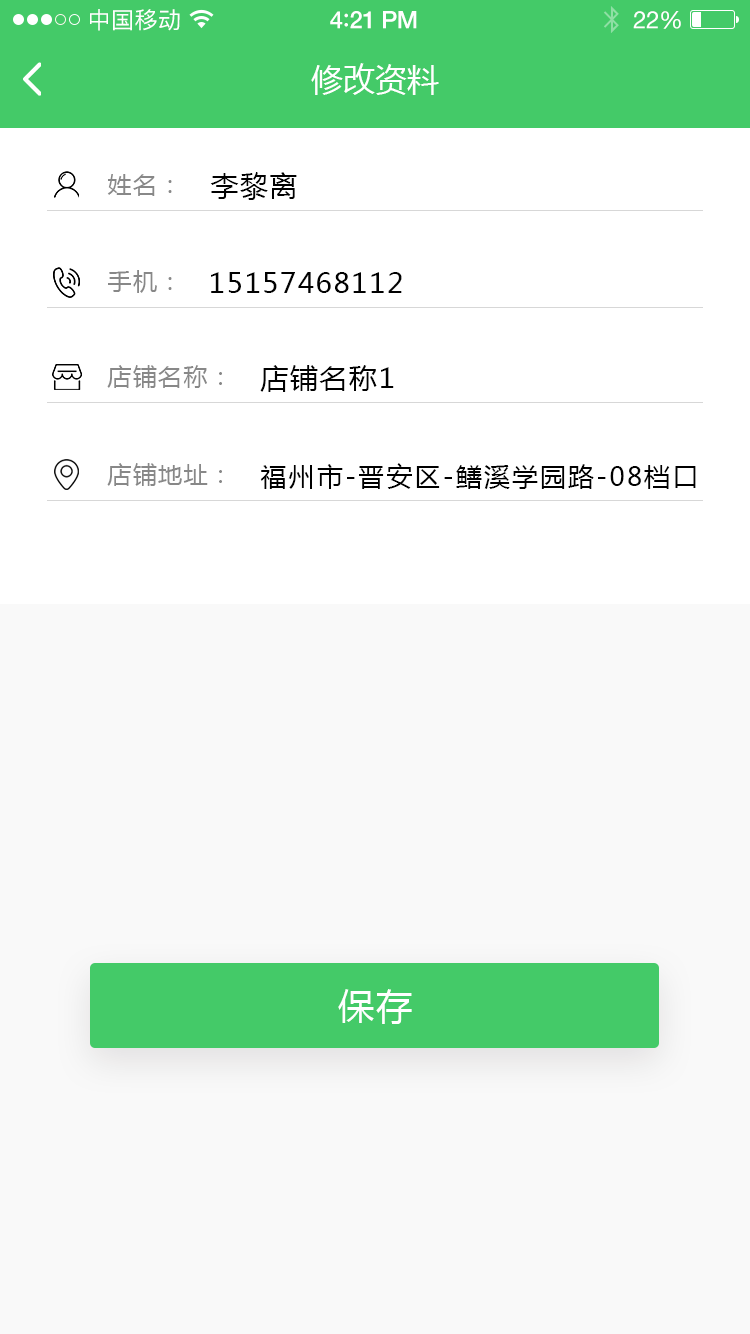
<style>
.page{position:relative;width:750px;height:1334px;background:#f9f9f9}
.page>*{position:absolute;margin:0}
.t1{font:23px "PingFangSC-Regular";letter-spacing:0.02em;color:#ffffff}
.t2{font:24px "HelveticaNeue-Medium";letter-spacing:-0.02em;color:#ffffff}
.t3{font:26px "Avenir-Medium";letter-spacing:-0.02em;color:#ffffff}
.t4{font:24px "HelveticaNeue";letter-spacing:-0.02em;color:#ffffff}
.t5{font:32px "MicrosoftYaHei";color:#ffffff;text-transform:uppercase}
.t6{font:24px "MicrosoftYaHei";letter-spacing:0.05em;color:#888888;text-transform:uppercase}
.t7{font:28px "MicrosoftYaHei";letter-spacing:0.05em;color:#010101;text-transform:uppercase}
.t8{font:26px "MicrosoftYaHei";letter-spacing:0.08em;color:#000000;text-transform:uppercase}
.t9{font:36px "MicrosoftYaHei";letter-spacing:0.06em;color:#ffffff;text-transform:uppercase}
</style>
<div class="page">
<p class="t1" style="left:90px;top:9px;width:90px;height:22px">中国移动</p>
<p class="t2" style="left:330px;top:11px;width:87px;height:18px">4<span class="t3">:</span>21 PM</p>
<p class="t4" style="left:633px;top:11px;width:48px;height:18px">22%</p>
<p class="t5" style="left:311px;top:63px;width:128px;height:32px">修改资料</p>
<p class="t6" style="left:107px;top:174px;width:65px;height:22px">姓名：</p>
<p class="t7" style="left:210px;top:172px;width:87px;height:28px">李黎离</p>
<p class="t6" style="left:108px;top:270px;width:64px;height:23px">手机：</p>
<p class="t7" style="left:211px;top:272px;width:191px;height:21px">15157468112</p>
<p class="t6" style="left:107px;top:365px;width:115px;height:23px">店铺名称：</p>
<p class="t7" style="left:260px;top:365px;width:134px;height:27px">店铺名称1</p>
<p class="t6" style="left:107px;top:463px;width:115px;height:23px">店铺地址：</p>
<p class="t8" style="left:260px;top:463px;width:436px;height:26px">福州市-晋安区-鳝溪学园路-08档口</p>
<p class="t9" style="left:338px;top:989px;width:74px;height:35px">保存</p>
</div>
